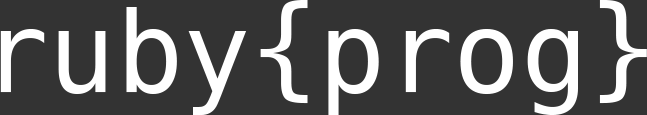
<style>
.page{position:relative;width:647px;height:115px;background:#333333}
.page>*{position:absolute;margin:0}
.t1{font:112.2px "Menlo-Regular";color:#ffffff}
</style>
<div class="page">
<p class="t1" style="left:0px;top:0px;width:647px;height:115px">ruby{prog}</p>
</div>
